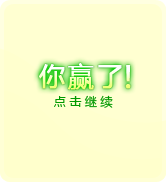
<style>
.page{position:relative;width:166px;height:182px;background:#ffffd1}
.page>*{position:absolute;margin:0}
.t1{font:26px "MicrosoftYaHei";letter-spacing:0.1em;font-weight:bold}
.t2{font:30px "MicrosoftYaHei";letter-spacing:0.1em;font-weight:bold}
.t3{font:12px "MicrosoftYaHei";letter-spacing:0.3em;color:#009900}
</style>
<div class="page">
<p class="t1" style="left:39px;top:63px;width:83px;height:27px">你赢了</p>
<p class="t2" style="left:125px;top:65px;width:6px;height:24px">!</p>
<p class="t3" style="left:54px;top:95px;width:59px;height:13px">点击继续</p>
</div>
